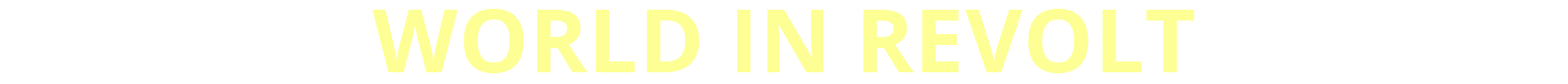
<style>
.page{position:relative;width:1568px;height:84px;background:#ffffff}
.page>*{position:absolute;margin:0}
.t1{font:88.2px "OpenSans-Bold";letter-spacing:0.01em;color:#fdff94;text-transform:uppercase}
</style>
<div class="page">
<p class="t1" style="left:372px;top:9px;width:823px;height:65px">world in revolt</p>
</div>
